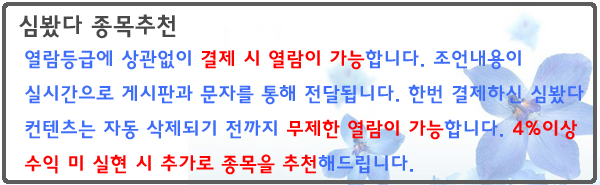
<style>
.page{position:relative;width:600px;height:185px;background:#ffffff}
.page>*{position:absolute;margin:0}
.t1{font:24px "HaanYGodic24";color:#494949}
.t2{font:20px "HaanYGodic24";color:#3e6ef9}
.t3{font:20px "HaanYGodic24";color:#ff0000}
.t4{font:20px "HaanYGodic24";color:#fe0101}
</style>
<div class="page">
<p class="t1" style="left:19px;top:14px;width:157px;height:25px">심봤다 종목추천</p>
<p class="t2" style="left:25px;top:49px;width:559px;height:126px">열람등급에 상관없이 <span class="t3">결제 시 열람이 가능</span>합니다. 조언내용이 실시간으로 게시판과 문자를 통해 전달됩니다. 한번 결제하신 심봤다 컨텐츠는 자동 삭제되기 전까지 <span class="t3">무제한 열람이 가능</span>합니다. <span class="t4">4%이상 수익 미 실현 시 추가로 종목을 추천</span>해드립니다.</p>
</div>
